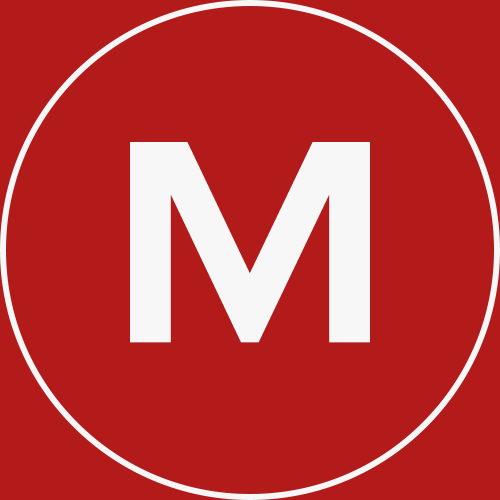
<style>
.page{position:relative;width:500px;height:500px;background:#b31b1b}
.page>*{position:absolute;margin:0}
.t1{font:300px "ProximaNova-Semibold";color:#f7f7f7;scale:1.15 1}
</style>
<div class="page">
<p class="t1" style="left:130px;top:142px;width:240px;height:201px">M</p>
</div>
